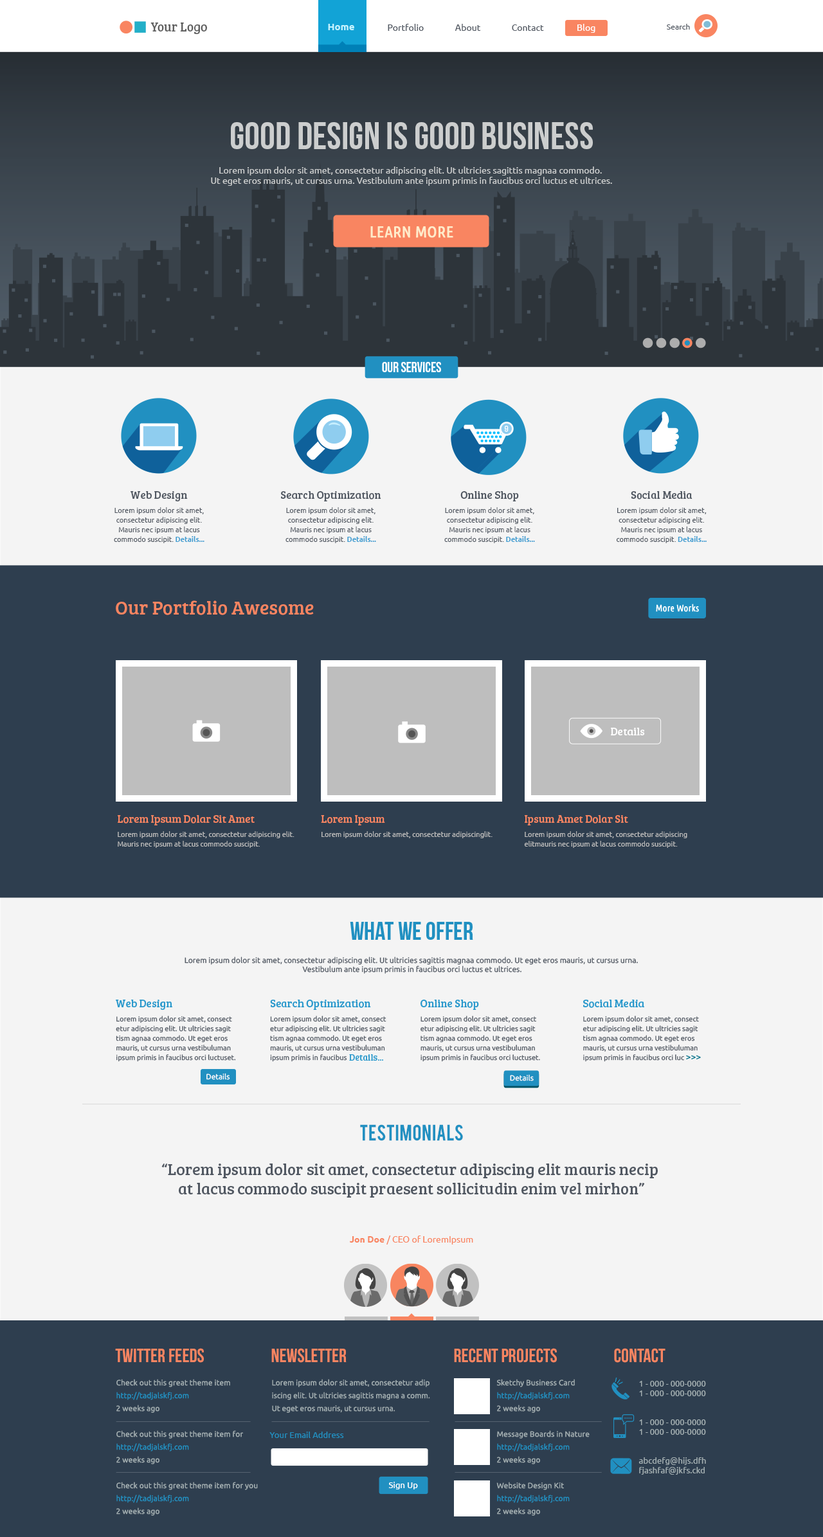
<style>
.page{position:relative;width:823px;height:1537px;background:#f4f4f4}
.page>*{position:absolute;margin:0}
.t1{font:12.9px "BreeSerif-Regular";color:#606060}
.t2{font:9.6px "Ubuntu-Bold";color:#c5f4ff}
.t3{font:9px "Ubuntu";color:#515862}
.t4{font:9px "Ubuntu";color:#ffffff}
.t5{font:7.7px "Ubuntu";color:#515862}
.t6{font:38.6px "BebasNeue";color:#cccece}
.t7{font:9px "Ubuntu";color:#cccece}
.t8{font:16.1px "UbuntuCondensed-Regular";color:#ffebca;font-weight:bold}
.t9{font:14.1px "BebasNeue";color:#ffffff}
.t10{font:10.9px "BreeSerif-Regular";color:#515862}
.t11{font:7.1px/9.6px "Ubuntu";color:#515862}
.t12{font:7.1px/9.6px "Ubuntu-Bold";color:#3e9dd1}
.t13{font:19.3px "BreeSerif-Regular";color:#f98561}
.t14{font:10.9px "BreeSerif-Regular";color:#ffffff}
.t15{font:10.9px "BreeSerif-Regular";color:#f98561}
.t16{font:7.1px/9.6px "Ubuntu";color:#bcbcbc}
.t17{font:7.1px "Ubuntu";color:#bcbcbc}
.t18{font:25.7px "BebasNeue";color:#2190c1}
.t19{font:10.9px "BreeSerif-Regular";color:#2b99cc}
.t20{font:9px/9.6px "Ubuntu";color:#027089}
.t21{font:9px "BreeSerif-Regular";color:#2b99cc}
.t22{font:7.5px "Ubuntu";color:#ffffff}
.t23{font:17.4px "Bebas";color:#2190c1}
.t24{font:16.1px "BreeSerif-Regular";color:#515862}
.t25{font:9px "Ubuntu";color:#f98561}
.t26{font:9px "Ubuntu-Bold";color:#f98561}
.t27{font:19.3px "BebasNeue";color:#f98561}
.t28{font:7.7px/12.9px "Ubuntu";letter-spacing:0.008em;color:#a3afb2}
.t29{font:7.7px/12.9px "Ubuntu";letter-spacing:0.008em;color:#2190c1}
.t30{font:7.7px/12.9px "Ubuntu";color:#a3afb2}
.t31{font:8.4px/9.6px "Ubuntu";color:#a3afb2}
.t32{font:8.4px "Ubuntu";letter-spacing:0.008em;color:#2190c1}
.t33{font:8.4px/9.6px "Ubuntu";letter-spacing:0.008em;color:#a3afb2}
.t34{font:8.4px "Ubuntu";letter-spacing:0.008em;color:#ffffff}
</style>
<div class="page">
<p class="t1" style="left:150px;top:22px;width:57px;height:12px">Your Logo</p>
<p class="t2" style="left:328px;top:24px;width:26px;height:6px">Home</p>
<p class="t3" style="left:388px;top:24px;width:156px;height:7px">Portfolio               About               Contact</p>
<p class="t4" style="left:577px;top:24px;width:18px;height:9px">Blog</p>
<p class="t5" style="left:667px;top:24px;width:23px;height:6px">Search</p>
<p class="t6" style="left:231px;top:122px;width:362px;height:27px">Good Design Is Good Business</p>
<p class="t7" style="left:211px;top:166px;width:401px;height:20px;text-align:center">Lorem ipsum dolor sit amet, consectetur adipiscing elit. Ut ultricies sagittis magnaa commodo. <br>Ut eget eros mauris, ut cursus urna. Vestibulum ante ipsum primis in faucibus orci luctus et ultrices.</p>
<p class="t8" style="left:370px;top:226px;width:83px;height:12px">LEARN MORE</p>
<p class="t9" style="left:382px;top:362px;width:59px;height:10px">oUR SERVICES</p>
<p class="t10" style="left:130px;top:491px;width:58px;height:10px">Web Design</p>
<p class="t10" style="left:281px;top:491px;width:100px;height:10px">Search Optimization</p>
<p class="t10" style="left:460px;top:491px;width:59px;height:10px">Online Shop</p>
<p class="t10" style="left:631px;top:491px;width:61px;height:9px">Social Media</p>
<p class="t11" style="left:114px;top:507px;width:90px;height:36px;text-align:center">Lorem ipsum dolor sit amet, <br>consectetur adipiscing elit. <br>Mauris nec ipsum at lacus <br>commodo suscipit. <span class="t12">Details...</span></p>
<p class="t11" style="left:285px;top:507px;width:91px;height:36px;text-align:center">Lorem ipsum dolor sit amet, <br>consectetur adipiscing elit. <br>Mauris nec ipsum at lacus <br>commodo suscipit. <span class="t12">Details...</span></p>
<p class="t11" style="left:444px;top:507px;width:91px;height:36px;text-align:center">Lorem ipsum dolor sit amet, <br>consectetur adipiscing elit. <br>Mauris nec ipsum at lacus <br>commodo suscipit. <span class="t12">Details...</span></p>
<p class="t11" style="left:616px;top:507px;width:90px;height:36px;text-align:center">Lorem ipsum dolor sit amet, <br>consectetur adipiscing elit. <br>Mauris nec ipsum at lacus <br>commodo suscipit. <span class="t12">Details...</span></p>
<p class="t13" style="left:116px;top:600px;width:198px;height:15px">Our Portfolio Awesome</p>
<p class="t14" style="left:611px;top:728px;width:34px;height:7px">Details</p>
<p class="t15" style="left:118px;top:815px;width:137px;height:10px">Lorem Ipsum Dolar Sit Amet</p>
<p class="t15" style="left:321px;top:815px;width:64px;height:10px">Lorem Ipsum</p>
<p class="t15" style="left:525px;top:815px;width:103px;height:10px">Ipsum Amet Dolar Sit</p>
<p class="t16" style="left:118px;top:831px;width:176px;height:17px">Lorem ipsum dolor sit amet, consectetur adipiscing elit. <br>Mauris nec ipsum at lacus commodo suscipit.</p>
<p class="t17" style="left:321px;top:831px;width:171px;height:7px">Lorem ipsum dolor sit amet, consectetur adipiscinglit.</p>
<p class="t16" style="left:524px;top:831px;width:163px;height:17px">Lorem ipsum dolor sit amet, consectetur adipiscing <br>elitmauris nec ipsum at lacus commodo suscipit.</p>
<p class="t18" style="left:350px;top:922px;width:123px;height:18px">WHAT WE OFFER</p>
<p class="t5" style="left:184px;top:957px;width:454px;height:17px;text-align:center">Lorem ipsum dolor sit amet, consectetur adipiscing elit. Ut ultricies sagittis magnaa commodo. Ut eget eros mauris, ut cursus urna. <br>Vestibulum ante ipsum primis in faucibus orci luctus et ultrices.</p>
<p class="t19" style="left:116px;top:1000px;width:56px;height:10px">Web Design</p>
<p class="t19" style="left:270px;top:1000px;width:101px;height:10px">Search Optimization</p>
<p class="t19" style="left:420px;top:1000px;width:59px;height:10px">Online Shop</p>
<p class="t19" style="left:583px;top:1000px;width:61px;height:8px">Social Media</p>
<p class="t11" style="left:116px;top:1016px;width:120px;height:46px">Lorem ipsum dolor sit amet, consect <br>etur adipiscing elit. Ut ultricies sagit<br>tism agnaa commodo. Ut eget eros mauris, ut cursus urna vestibuluman ipsum primis in faucibus orci luctuset.</p>
<p class="t11" style="left:270px;top:1016px;width:116px;height:46px">Lorem ipsum dolor sit amet, consect <br>etur adipiscing elit. Ut ultricies sagit<br>tism agnaa commodo. Ut eget eros mauris, ut cursus urna vestibuluman ipsum primis in faucibus</p>
<p class="t11" style="left:420px;top:1016px;width:120px;height:46px">Lorem ipsum dolor sit amet, consect <br>etur adipiscing elit. Ut ultricies sagit<br>tism agnaa commodo. Ut eget eros mauris, ut cursus urna vestibuluman ipsum primis in faucibus orci luctuset.</p>
<p class="t11" style="left:582px;top:1016px;width:119px;height:46px">Lorem ipsum dolor sit amet, consect <br>etur adipiscing elit. Ut ultricies sagit<br>tism agnaa commodo. Ut eget eros mauris, ut cursus urna vestibuluman ipsum primis in faucibus orci luc <span class="t20">&gt;&gt;&gt;</span></p>
<p class="t21" style="left:349px;top:1054px;width:34px;height:7px">Details...</p>
<p class="t22" style="left:206px;top:1073px;width:24px;height:7px">Details</p>
<p class="t22" style="left:510px;top:1074px;width:24px;height:7px">Details</p>
<p class="t23" style="left:360px;top:1124px;width:103px;height:17px">Testimonials</p>
<p class="t24" style="left:161px;top:1164px;width:497px;height:34px;text-align:center">“Lorem ipsum dolor sit amet, consectetur adipiscing elit mauris necip <br>at lacus commodo suscipit praesent sollicitudin enim vel mirhon”</p>
<p class="t25" style="left:349px;top:1236px;width:124px;height:9px"><span class="t26">Jon Doe</span> / CEO of LoremIpsum</p>
<p class="t27" style="left:115px;top:1348px;width:89px;height:15px">Twitter FEEDs</p>
<p class="t27" style="left:271px;top:1348px;width:75px;height:15px">NEWSLETTER</p>
<p class="t27" style="left:454px;top:1348px;width:103px;height:15px">recent projects</p>
<p class="t27" style="left:614px;top:1348px;width:51px;height:15px">Contact</p>
<p class="t28" style="left:116px;top:1379px;width:142px;height:137px">Check out this great theme item<br><span class="t29">http://tadjalskfj.com<br></span>2 weeks ago<br><br>Check out this great theme item for<br><span class="t29">http://tadjalskfj.com <br></span>2 weeks ago<br><br>Check out this great theme item for you<br><span class="t29">http://tadjalskfj.com <br></span>2 weeks ago</p>
<p class="t30" style="left:272px;top:1379px;width:158px;height:34px">Lorem ipsum dolor sit amet, consectetur adip<br>iscing elit. Ut ultricies sagittis magna a comm. <br>Ut eget eros mauris, ut cursus urna.</p>
<p class="t28" style="left:496px;top:1379px;width:94px;height:137px">Sketchy Business Card<br><span class="t29">http://tadjalskfj.com<br></span>2 weeks ago<br><br>Message Boards in Nature<br><span class="t29">http://tadjalskfj.com<br></span>2 weeks ago<br><br>Website Design Kit<br><span class="t29">http://tadjalskfj.com<br></span>2 weeks ago</p>
<p class="t31" style="left:639px;top:1381px;width:67px;height:15px">1 - 000 - 000-0000<br>1 - 000 - 000-0000</p>
<p class="t31" style="left:639px;top:1419px;width:67px;height:16px">1 - 000 - 000-0000<br>1 - 000 - 000-0000</p>
<p class="t32" style="left:269px;top:1432px;width:75px;height:6px">Your Email Address</p>
<p class="t33" style="left:638px;top:1457px;width:68px;height:18px">abcdefg@hijs.dfh<br>fjashfaf@jkfs.ckd</p>
<p class="t34" style="left:388px;top:1482px;width:30px;height:8px">Sign Up</p>
</div>
